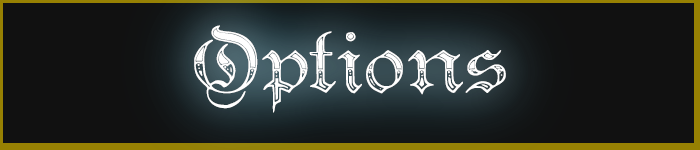
<style>
.page{position:relative;width:700px;height:150px;background:#111111}
.page>*{position:absolute;margin:0}
.t1{font:72px "TeutonicNo4-DemiBold";color:#ffffff}
</style>
<div class="page">
<p class="t1" style="left:194px;top:25px;width:312px;height:88px">Options</p>
</div>
